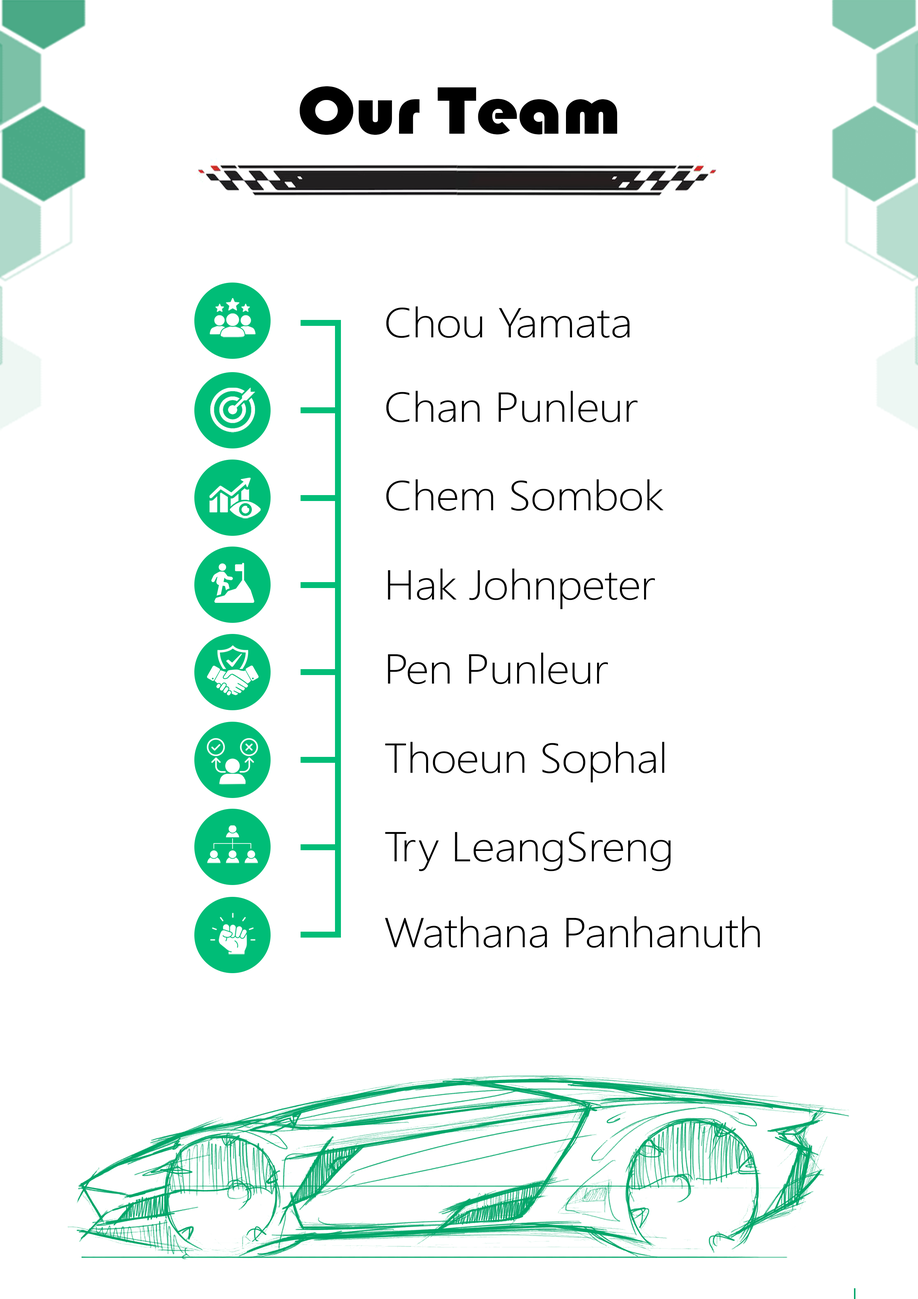
<style>
.page{position:relative;width:918px;height:1299px;background:#ffffff}
.page>*{position:absolute;margin:0}
.t1{font:69.6px "Bauhaus93";letter-spacing:-0.01em;color:#000000;scale:1.1 1}
.t2{font:41.7px "AKbalthomChoeungEk";letter-spacing:-0.01em;color:#000000;scale:1.1 1}
</style>
<div class="page">
<p class="t1" style="left:300px;top:86px;width:318px;height:49px">Our Team</p>
<p class="t2" style="left:386px;top:306px;width:244px;height:32px">Chou Yamata</p>
<p class="t2" style="left:386px;top:391px;width:252px;height:31px">Chan Punleur</p>
<p class="t2" style="left:386px;top:479px;width:278px;height:32px">Chem Sombok</p>
<p class="t2" style="left:388px;top:568px;width:267px;height:41px">Hak Johnpeter</p>
<p class="t2" style="left:388px;top:652px;width:220px;height:32px">Pen Punleur</p>
<p class="t2" style="left:385px;top:742px;width:280px;height:40px">Thoeun Sophal</p>
<p class="t2" style="left:385px;top:831px;width:286px;height:40px">Try LeangSreng</p>
<p class="t2" style="left:385px;top:916px;width:375px;height:32px">Wathana Panhanuth</p>
</div>
